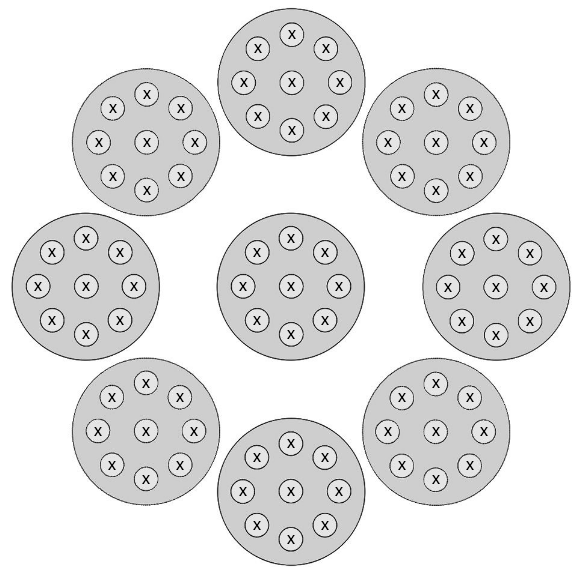
<style>
.page{position:relative;width:584px;height:577px;background:#ffffff}
.page>*{position:absolute;margin:0}
.t1{font:8.7px "MyriadPro-Regular";color:#000000}
</style>
<div class="page">
<p class="t1" style="left:288px;top:30px;width:8px;height:9px">x</p>
<p class="t1" style="left:254px;top:44px;width:8px;height:9px">x</p>
<p class="t1" style="left:322px;top:44px;width:8px;height:9px">x</p>
<p class="t1" style="left:240px;top:78px;width:8px;height:9px">x</p>
<p class="t1" style="left:288px;top:78px;width:8px;height:9px">x</p>
<p class="t1" style="left:336px;top:78px;width:8px;height:9px">x</p>
<p class="t1" style="left:143px;top:90px;width:8px;height:9px">x</p>
<p class="t1" style="left:432px;top:90px;width:8px;height:9px">x</p>
<p class="t1" style="left:109px;top:104px;width:8px;height:9px">x</p>
<p class="t1" style="left:177px;top:104px;width:8px;height:9px">x</p>
<p class="t1" style="left:254px;top:112px;width:8px;height:9px">x</p>
<p class="t1" style="left:322px;top:112px;width:8px;height:9px">x</p>
<p class="t1" style="left:398px;top:104px;width:8px;height:9px">x</p>
<p class="t1" style="left:466px;top:104px;width:8px;height:9px">x</p>
<p class="t1" style="left:288px;top:126px;width:8px;height:9px">x</p>
<p class="t1" style="left:95px;top:138px;width:8px;height:9px">x</p>
<p class="t1" style="left:143px;top:138px;width:8px;height:9px">x</p>
<p class="t1" style="left:191px;top:138px;width:8px;height:9px">x</p>
<p class="t1" style="left:384px;top:138px;width:8px;height:9px">x</p>
<p class="t1" style="left:432px;top:138px;width:8px;height:9px">x</p>
<p class="t1" style="left:480px;top:138px;width:8px;height:9px">x</p>
<p class="t1" style="left:109px;top:172px;width:8px;height:9px">x</p>
<p class="t1" style="left:177px;top:172px;width:8px;height:9px">x</p>
<p class="t1" style="left:398px;top:172px;width:8px;height:9px">x</p>
<p class="t1" style="left:466px;top:172px;width:8px;height:9px">x</p>
<p class="t1" style="left:143px;top:186px;width:8px;height:9px">x</p>
<p class="t1" style="left:432px;top:186px;width:8px;height:9px">x</p>
<p class="t1" style="left:82px;top:234px;width:8px;height:9px">x</p>
<p class="t1" style="left:287px;top:234px;width:8px;height:9px">x</p>
<p class="t1" style="left:492px;top:235px;width:8px;height:9px">x</p>
<p class="t1" style="left:48px;top:248px;width:8px;height:9px">x</p>
<p class="t1" style="left:116px;top:248px;width:8px;height:9px">x</p>
<p class="t1" style="left:253px;top:248px;width:8px;height:9px">x</p>
<p class="t1" style="left:321px;top:248px;width:8px;height:9px">x</p>
<p class="t1" style="left:458px;top:249px;width:8px;height:9px">x</p>
<p class="t1" style="left:526px;top:249px;width:8px;height:9px">x</p>
<p class="t1" style="left:34px;top:282px;width:8px;height:9px">x</p>
<p class="t1" style="left:82px;top:282px;width:8px;height:9px">x</p>
<p class="t1" style="left:130px;top:282px;width:8px;height:9px">x</p>
<p class="t1" style="left:239px;top:282px;width:8px;height:9px">x</p>
<p class="t1" style="left:287px;top:282px;width:8px;height:9px">x</p>
<p class="t1" style="left:335px;top:282px;width:8px;height:9px">x</p>
<p class="t1" style="left:444px;top:283px;width:8px;height:9px">x</p>
<p class="t1" style="left:492px;top:283px;width:8px;height:9px">x</p>
<p class="t1" style="left:540px;top:283px;width:8px;height:9px">x</p>
<p class="t1" style="left:48px;top:316px;width:8px;height:9px">x</p>
<p class="t1" style="left:116px;top:316px;width:8px;height:9px">x</p>
<p class="t1" style="left:253px;top:316px;width:8px;height:9px">x</p>
<p class="t1" style="left:321px;top:316px;width:8px;height:9px">x</p>
<p class="t1" style="left:458px;top:317px;width:8px;height:9px">x</p>
<p class="t1" style="left:526px;top:317px;width:8px;height:9px">x</p>
<p class="t1" style="left:82px;top:330px;width:8px;height:9px">x</p>
<p class="t1" style="left:287px;top:330px;width:8px;height:9px">x</p>
<p class="t1" style="left:492px;top:331px;width:8px;height:9px">x</p>
<p class="t1" style="left:142px;top:379px;width:8px;height:9px">x</p>
<p class="t1" style="left:432px;top:379px;width:8px;height:9px">x</p>
<p class="t1" style="left:108px;top:393px;width:8px;height:9px">x</p>
<p class="t1" style="left:176px;top:393px;width:8px;height:9px">x</p>
<p class="t1" style="left:398px;top:393px;width:8px;height:9px">x</p>
<p class="t1" style="left:466px;top:393px;width:8px;height:9px">x</p>
<p class="t1" style="left:94px;top:427px;width:8px;height:9px">x</p>
<p class="t1" style="left:142px;top:427px;width:8px;height:9px">x</p>
<p class="t1" style="left:190px;top:427px;width:8px;height:9px">x</p>
<p class="t1" style="left:384px;top:427px;width:8px;height:9px">x</p>
<p class="t1" style="left:432px;top:427px;width:8px;height:9px">x</p>
<p class="t1" style="left:480px;top:427px;width:8px;height:9px">x</p>
<p class="t1" style="left:287px;top:439px;width:8px;height:9px">x</p>
<p class="t1" style="left:108px;top:461px;width:8px;height:9px">x</p>
<p class="t1" style="left:176px;top:461px;width:8px;height:9px">x</p>
<p class="t1" style="left:253px;top:453px;width:8px;height:9px">x</p>
<p class="t1" style="left:321px;top:453px;width:8px;height:9px">x</p>
<p class="t1" style="left:398px;top:461px;width:8px;height:9px">x</p>
<p class="t1" style="left:466px;top:461px;width:8px;height:9px">x</p>
<p class="t1" style="left:142px;top:475px;width:8px;height:9px">x</p>
<p class="t1" style="left:432px;top:475px;width:8px;height:9px">x</p>
<p class="t1" style="left:239px;top:487px;width:8px;height:9px">x</p>
<p class="t1" style="left:287px;top:487px;width:8px;height:9px">x</p>
<p class="t1" style="left:335px;top:487px;width:8px;height:9px">x</p>
<p class="t1" style="left:253px;top:521px;width:8px;height:9px">x</p>
<p class="t1" style="left:321px;top:521px;width:8px;height:9px">x</p>
<p class="t1" style="left:287px;top:535px;width:8px;height:9px">x</p>
</div>
